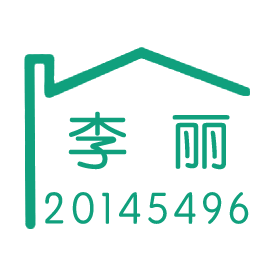
<style>
.page{position:relative;width:277px;height:277px;background:#ffffff}
.page>*{position:absolute;margin:0}
.t1{font:60px "STYuanti-SC-Regular";letter-spacing:0.075em;color:#10a07d}
.t2{font:45px "STYuanti-SC-Regular";letter-spacing:0.075em;color:#10a07d}
</style>
<div class="page">
<p class="t1" style="left:68px;top:111px;width:162px;height:59px">李  丽</p>
<p class="t2" style="left:45px;top:192px;width:204px;height:32px">20145496</p>
</div>
